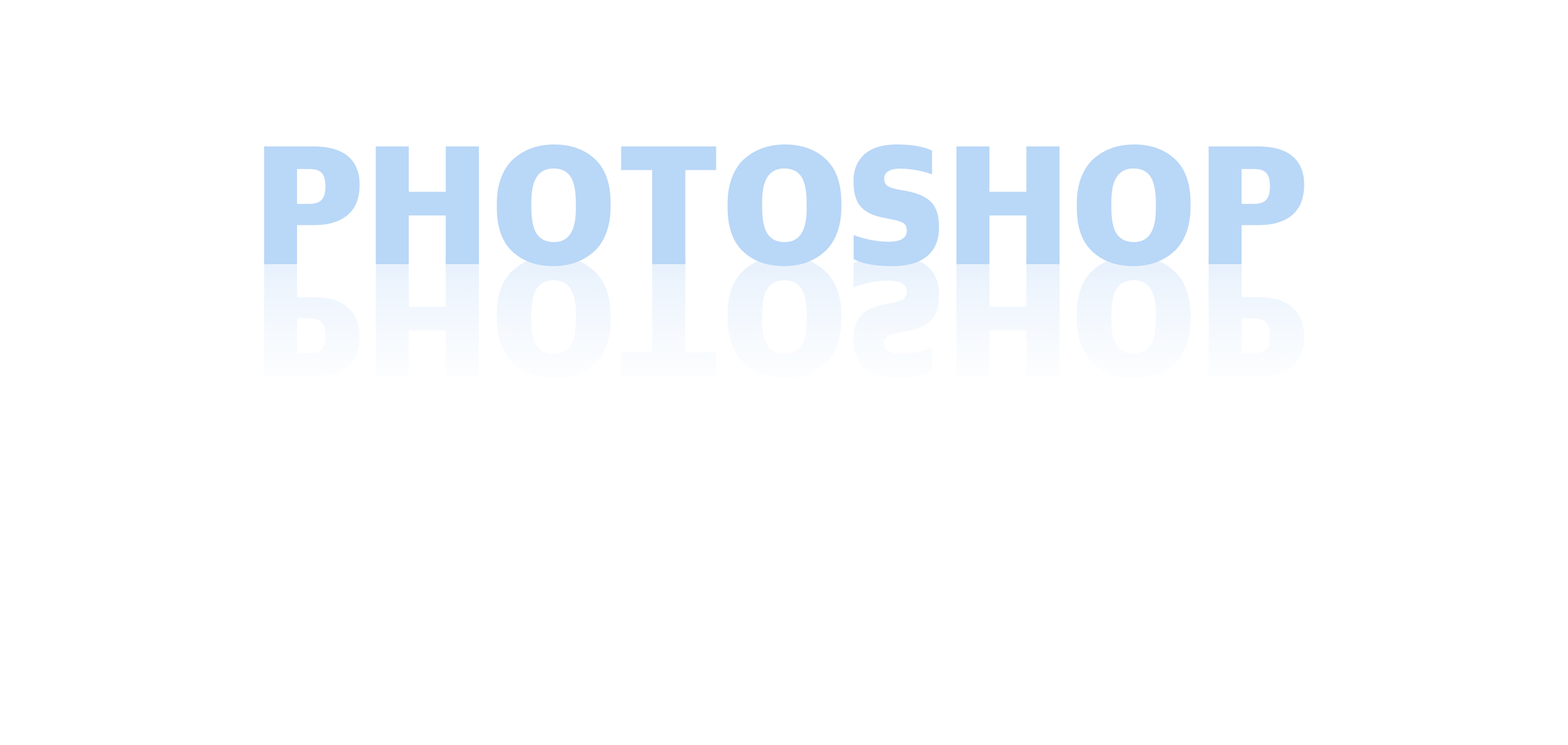
<style>
.page{position:relative;width:1568px;height:745px;background:#ffffff}
.page>*{position:absolute;margin:0}
.t1{font:175.5px "AppleSDGothicNeoH00";color:#b9d7f7}
.t2{font:175.5px "AppleSDGothicNeoH00";color:#f3f8fe}
</style>
<div class="page">
<p class="t1" style="left:264px;top:144px;width:1040px;height:122px">PHOTOSHOP</p>
<p class="t2" style="left:264px;top:256px;width:1040px;height:122px">PHOTOSHOP</p>
</div>
